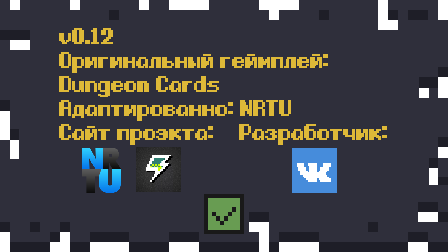
<style>
.page{position:relative;width:448px;height:252px;background:#2f2f3b}
.page>*{position:absolute;margin:0}
.t1{font:14px/24px "Gnomoria_rus";color:#deb938;font-weight:bold}
</style>
<div class="page">
<p class="t1" style="left:59px;top:28px;width:328px;height:117px">v0.12<br>Оригинальный геймплей: <br>Dungeom Cards<br>Адаптированно: NRTU<br>Сайт проэкта: Разработчик:</p>
</div>
